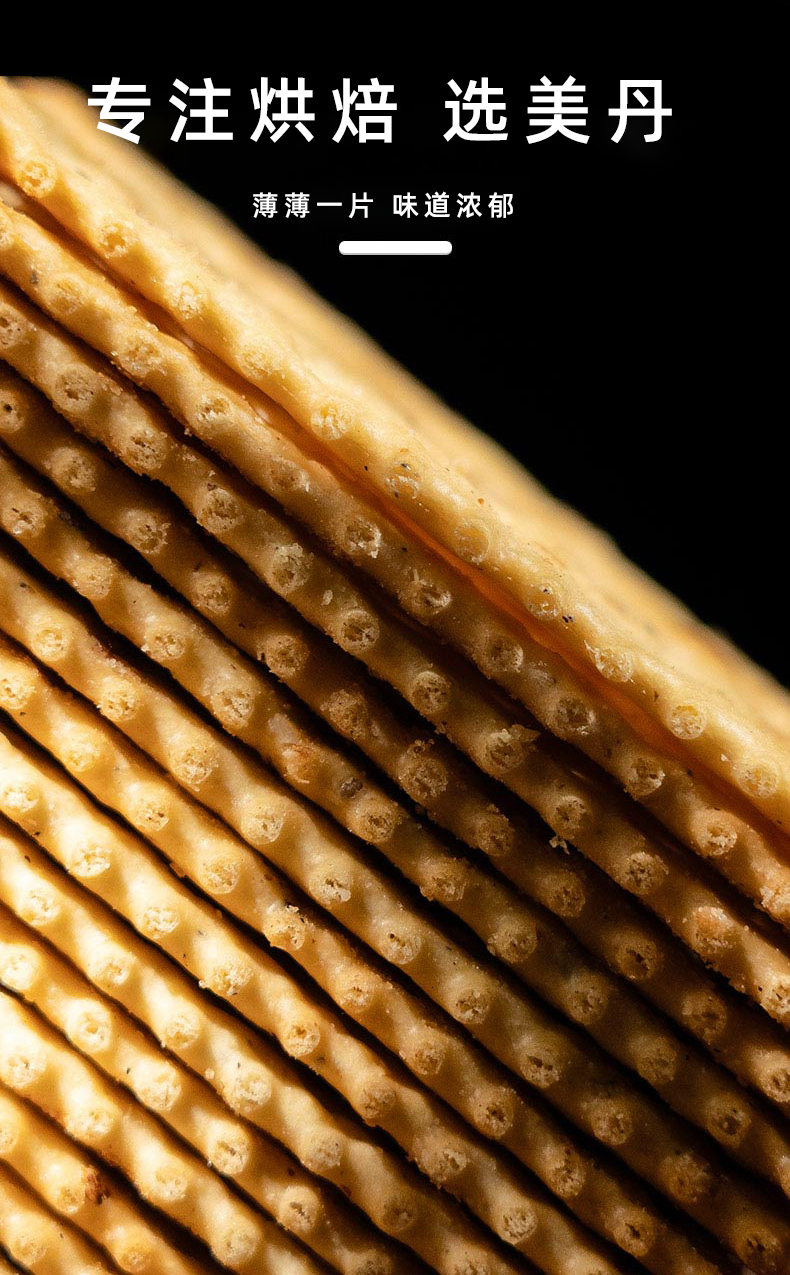
<style>
.page{position:relative;width:790px;height:1275px}
.page>*{position:absolute;margin:0}
.t1{font:71.5px "AlibabaPuHuiTi-Medium";letter-spacing:0.16em;color:#ffffff}
.t2{font:28px "AlibabaPuHuiTi-Medium";letter-spacing:0.16em;color:#ffffff}
</style>
<div class="page">
<p class="t1" style="left:88px;top:75px;width:584px;height:69px">专注烘焙 选美丹</p>
<p class="t2" style="left:253px;top:191px;width:260px;height:28px">薄薄一片 味道浓郁</p>
</div>
